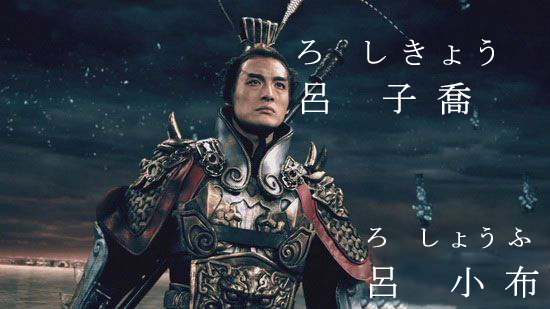
<style>
.page{position:relative;width:550px;height:309px}
.page>*{position:absolute;margin:0}
.t1{font:30px "MS-PMincho";letter-spacing:0.5em;color:#ffffff;font-weight:bold}
.t2{font:36px "MS-PMincho";letter-spacing:0.5em;color:#ffffff;font-weight:bold}
.t3{font:24px "MS-PMincho";letter-spacing:0.5em;color:#ffffff;font-weight:bold}
</style>
<div class="page">
<p class="t1" style="left:298px;top:39px;width:196px;height:27px">ろ しきょう</p>
<p class="t2" style="left:302px;top:82px;width:169px;height:33px">呂 子喬</p>
<p class="t3" style="left:367px;top:227px;width:164px;height:22px">ろ しょうふ</p>
<p class="t2" style="left:370px;top:265px;width:169px;height:34px">呂 小布</p>
</div>
